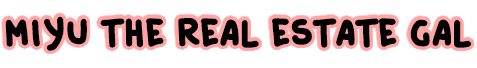
<style>
.page{position:relative;width:477px;height:68px;background:#ffffff}
.page>*{position:absolute;margin:0}
.t1{font:50px "CatatanPerjalanan";color:#000000}
</style>
<div class="page">
<p class="t1" style="left:5px;top:16px;width:467px;height:35px">Miyu the real estate gal</p>
</div>
